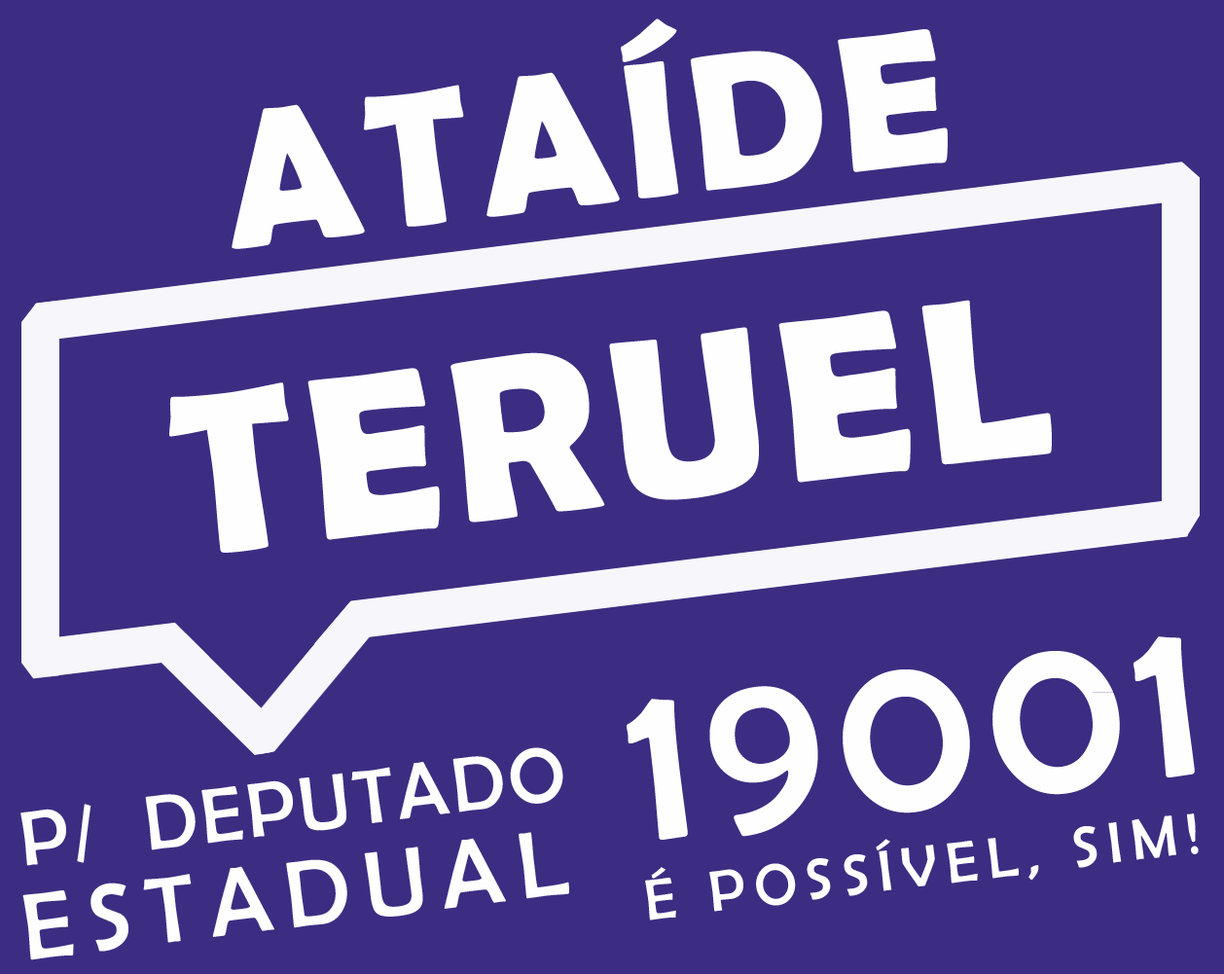
<style>
.page{position:relative;width:1224px;height:974px;background:#3c2d82}
.page>*{position:absolute;margin:0}
.t1{font:194.6px "BerlinSansFBDemi-Bold";letter-spacing:0.05em;color:#fefeff;text-transform:uppercase}
.t2{font:233.5px "BerlinSansFBDemi-Bold";letter-spacing:0.05em;color:#fefeff;text-transform:uppercase}
.t3{font:233.5px "BerlinSansFB-Reg";letter-spacing:0.05em;color:#fefeff;text-transform:uppercase}
.t4{font:77.8px "BerlinSansFB-Reg";letter-spacing:0.05em;color:#fefeff;text-transform:uppercase}
.t5{font:58.4px "BerlinSansFB-Reg";letter-spacing:0.16em;color:#ffffff;text-transform:uppercase}
.t6{font:95.4px "BerlinSansFB-Reg";letter-spacing:0.15em;color:#fefeff;text-transform:uppercase}
</style>
<div class="page">
<p class="t1" style="left:232px;top:18px;width:716px;height:231px;rotate:-7deg">ATAÍDE</p>
<p class="t2" style="left:169px;top:300px;width:883px;height:253px;rotate:-7deg">TERUEL</p>
<p class="t3" style="left:627px;top:636px;width:568px;height:204px;rotate:-7deg">19001</p>
<p class="t4" style="left:20px;top:747px;width:543px;height:119px;rotate:-7deg">p/  deputado</p>
<p class="t5" style="left:645px;top:814px;width:554px;height:107px;rotate:-7deg">é possível, sim!</p>
<p class="t6" style="left:22px;top:832px;width:547px;height:128px;rotate:-7deg">estadual</p>
</div>
